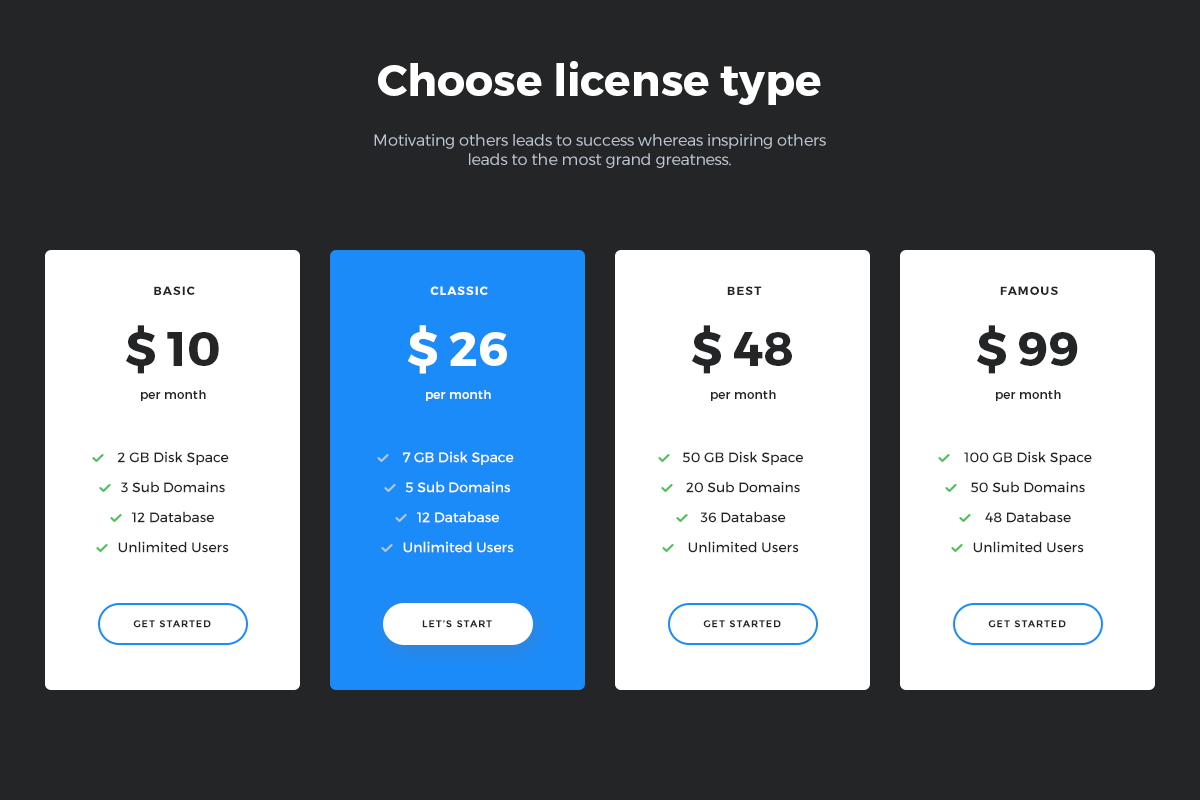
<style>
.page{position:relative;width:1200px;height:800px;background:#242526}
.page>*{position:absolute;margin:0}
.t1{font:44px "Montserrat-Bold";color:#ffffff}
.t2{font:16px "Montserrat-Light";color:#bcc6d0}
.t3{font:12px "Montserrat-Bold";letter-spacing:0.08em;color:#242526;text-transform:uppercase}
.t4{font:12px "Montserrat-Bold";letter-spacing:0.08em;color:#ffffff;text-transform:uppercase}
.t5{font:48px "Montserrat-Bold";color:#242526}
.t6{font:48px "Montserrat-Bold";color:#ffffff}
.t7{font:12px "Montserrat-Regular";letter-spacing:0.025em;color:#242526}
.t8{font:12px "Montserrat-Regular";letter-spacing:0.025em;color:#ffffff}
.t9{font:14px/30px "Montserrat-Regular";color:#242526}
.t10{font:14px/30px "Montserrat-Regular";color:#ffffff}
.t11{font:10px "Montserrat-Bold";letter-spacing:0.08em;color:#242526;text-transform:uppercase}
</style>
<div class="page">
<p class="t1" style="left:378px;top:61px;width:443px;height:44px">Choose license type</p>
<p class="t2" style="left:374px;top:134px;width:452px;height:34px;text-align:center">Motivating others leads to success whereas inspiring others leads to the most grand greatness.</p>
<p class="t3" style="left:154px;top:286px;width:41px;height:9px">basic</p>
<p class="t4" style="left:430px;top:286px;width:58px;height:9px">classic</p>
<p class="t3" style="left:727px;top:286px;width:35px;height:9px">best</p>
<p class="t3" style="left:1000px;top:286px;width:58px;height:9px">famous</p>
<p class="t5" style="left:126px;top:325px;width:93px;height:49px">$ 10</p>
<p class="t6" style="left:408px;top:325px;width:99px;height:49px">$ 26</p>
<p class="t5" style="left:692px;top:325px;width:100px;height:49px">$ 48</p>
<p class="t5" style="left:977px;top:325px;width:101px;height:49px">$ 99</p>
<p class="t7" style="left:141px;top:390px;width:65px;height:11px">per month</p>
<p class="t8" style="left:426px;top:390px;width:65px;height:11px">per month</p>
<p class="t7" style="left:711px;top:390px;width:65px;height:11px">per month</p>
<p class="t7" style="left:996px;top:390px;width:65px;height:11px">per month</p>
<p class="t9" style="left:117px;top:451px;width:112px;height:102px;text-align:center">2 GB Disk Space<br>3 Sub Domains<br>12 Database<br>Unlimited Users</p>
<p class="t10" style="left:403px;top:451px;width:111px;height:102px;text-align:center">7 GB Disk Space<br>5 Sub Domains<br>12 Database<br>Unlimited Users</p>
<p class="t9" style="left:682px;top:451px;width:121px;height:102px;text-align:center">50 GB Disk Space<br>20 Sub Domains<br>36 Database<br>Unlimited Users</p>
<p class="t9" style="left:964px;top:451px;width:128px;height:102px;text-align:center">100 GB Disk Space<br>50 Sub Domains<br>48 Database<br>Unlimited Users</p>
<p class="t11" style="left:133px;top:620px;width:78px;height:8px">get started</p>
<p class="t11" style="left:422px;top:620px;width:70px;height:8px">let’s start</p>
<p class="t11" style="left:703px;top:620px;width:78px;height:8px">get started</p>
<p class="t11" style="left:988px;top:620px;width:78px;height:8px">get started</p>
</div>
